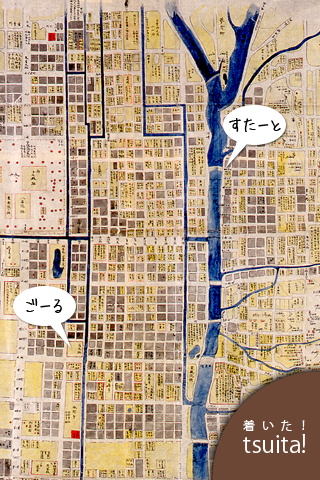
<style>
.page{position:relative;width:320px;height:480px}
.page>*{position:absolute;margin:0}
.t1{font:18px "HuiFontP";color:#000000}
.t2{font:24px/12px "KozGoPr6N-Regular";color:#ffffff}
.t3{font:12px/12px "KozGoPr6N-Regular";letter-spacing:0.62em;color:#ffffff}
</style>
<div class="page">
<p class="t1" style="left:229px;top:118px;width:52px;height:14px">すたーと</p>
<p class="t1" style="left:26px;top:298px;width:36px;height:15px">ごーる</p>
<p class="t2" style="left:243px;top:420px;width:62px;height:33px;text-align:justify"><span class="t3">着いた！<br></span>tsuita!</p>
</div>
